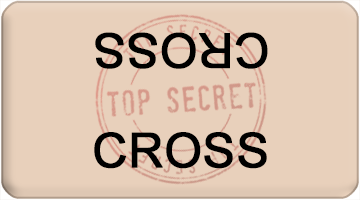
<style>
.page{position:relative;width:360px;height:200px;background:#e8d0bb}
.page>*{position:absolute;margin:0}
.t1{font:48px "ArialMT";color:#000000;font-weight:bold}
</style>
<div class="page">
<p class="t1" style="left:95px;top:32px;width:173px;height:37px;rotate:180deg">CROSS</p>
<p class="t1" style="left:94px;top:132px;width:173px;height:37px">CROSS</p>
</div>
